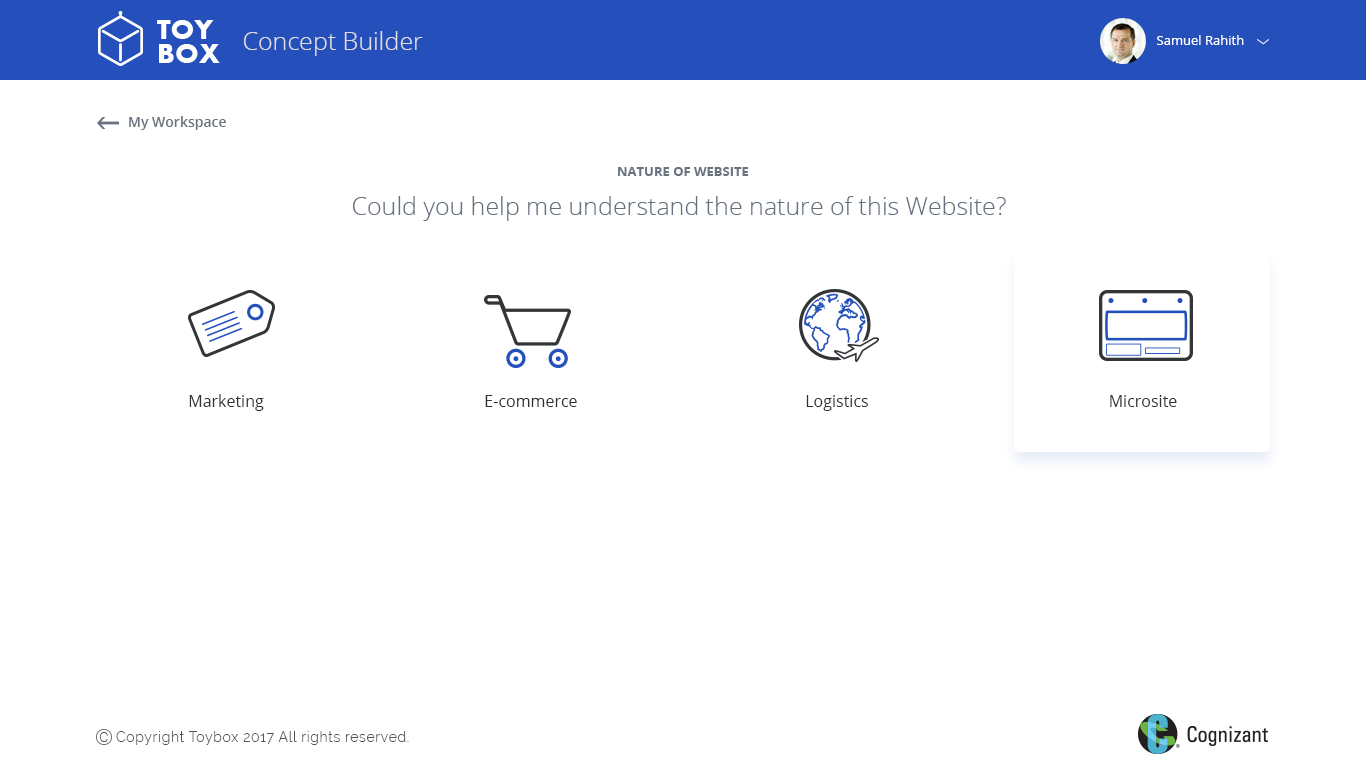
<style>
.page{position:relative;width:1366px;height:768px;background:#ffffff}
.page>*{position:absolute;margin:0}
.t1{font:25px "OpenSans-Light";color:#dedede}
.t2{font:13px "OpenSans";color:#ffffff}
.t3{font:14px "OpenSans-Semibold";color:#69727f}
.t4{font:13px "OpenSans-Bold";color:#69727f;text-transform:uppercase}
.t5{font:25px "OpenSans-Light";color:#667180}
.t6{font:16px "OpenSans";color:#323232}
.t7{font:16px "OpenSans";color:#313131}
.t8{font:18.2px "Roboto-Thin";color:#545454}
.t9{font:14px "Raleway-Light";letter-spacing:0.05em;color:#545454}
</style>
<div class="page">
<p class="t1" style="left:244px;top:31px;width:179px;height:25px">Concept Builder</p>
<p class="t2" style="left:1157px;top:35px;width:87px;height:10px">Samuel Rahith</p>
<p class="t3" style="left:129px;top:116px;width:97px;height:14px">My Workspace</p>
<p class="t4" style="left:618px;top:167px;width:131px;height:9px">Nature of Website</p>
<p class="t5" style="left:353px;top:196px;width:653px;height:25px">Could you help me understand the nature of this Website?</p>
<p class="t6" style="left:189px;top:394px;width:75px;height:17px">Marketing</p>
<p class="t7" style="left:485px;top:395px;width:92px;height:12px">E-commerce</p>
<p class="t7" style="left:806px;top:395px;width:62px;height:16px">Logistics</p>
<p class="t7" style="left:1110px;top:395px;width:67px;height:12px">Microsite</p>
<p class="t8" style="left:100px;top:732px;width:8px;height:10px">c</p>
<p class="t9" style="left:116px;top:731px;width:293px;height:14px">Copyright Toybox 2017 All rights reserved.</p>
</div>
